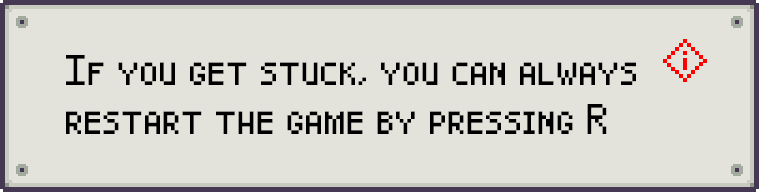
<style>
.page{position:relative;width:759px;height:192px;background:#e3e3db}
.page>*{position:absolute;margin:0}
.t1{font:30px/48.7px "Pixel-Caps";color:#000000}
</style>
<div class="page">
<p class="t1" style="left:66px;top:55px;width:570px;height:79px">If you get stuck, you can always<br>restart the game by pressing R</p>
</div>
